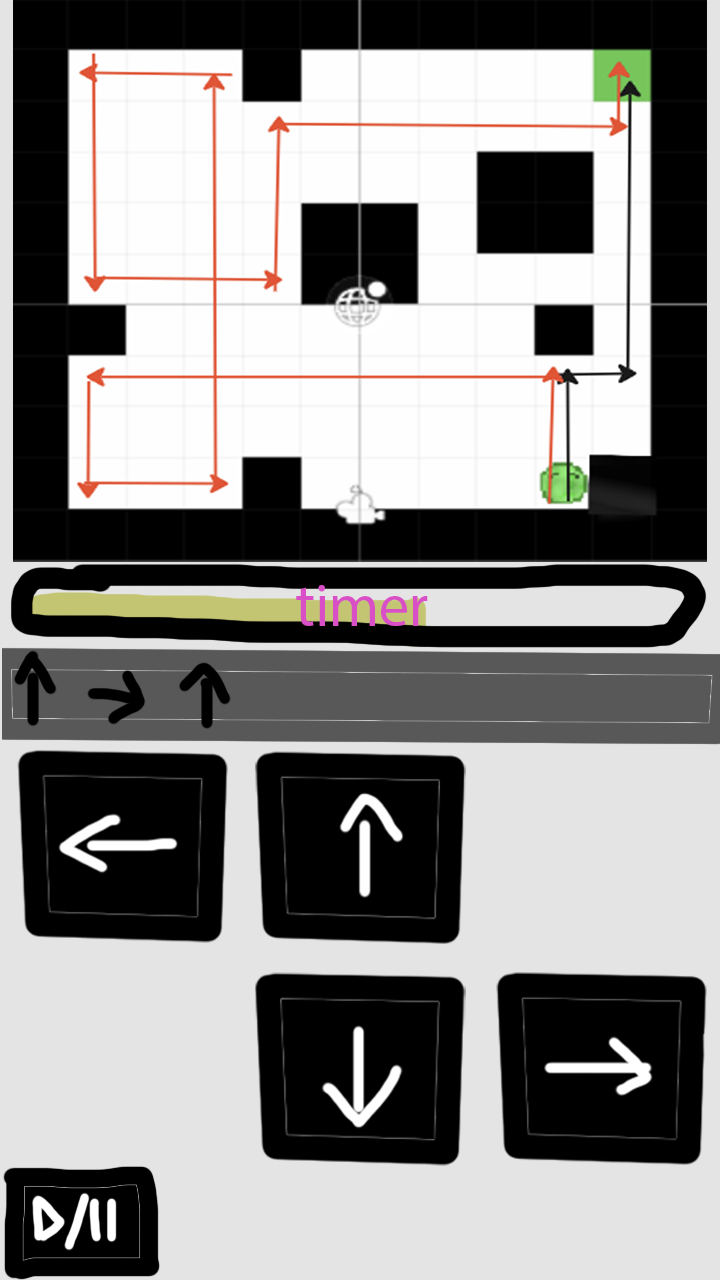
<style>
.page{position:relative;width:720px;height:1280px;background:#000000}
.page>*{position:absolute;margin:0}
.t1{font:60px "MyriadPro-Regular";color:#d84fc6}
</style>
<div class="page">
<p class="t1" style="left:296px;top:585px;width:132px;height:41px">timer</p>
</div>
